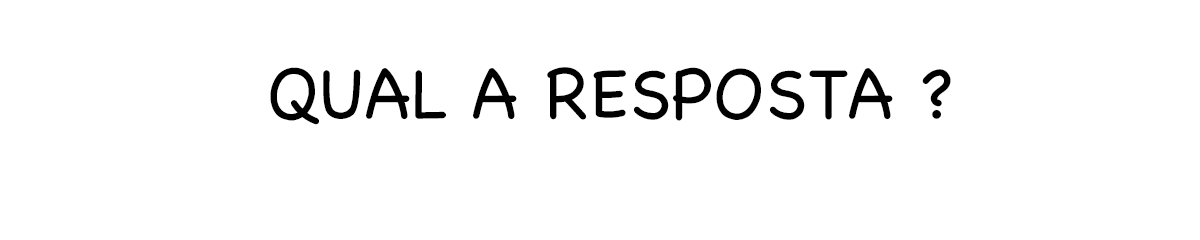
<style>
.page{position:relative;width:1200px;height:240px;background:#ffffff}
.page>*{position:absolute;margin:0}
.t1{font:72px "Chalkboard";color:#000000;text-transform:uppercase}
</style>
<div class="page">
<p class="t1" style="left:270px;top:67px;width:681px;height:58px">Qual a resposta ?</p>
</div>
